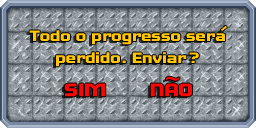
<style>
.page{position:relative;width:256px;height:128px}
.page>*{position:absolute;margin:0}
.t1{font:18px/22px "MTV2C";color:#ffc706;scale:1.2 1}
.t2{font:18px "MTV2C";color:#ffc706;scale:1.2 1}
.t3{font:22px "ArialMT";color:#ff0606;scale:1.2 1}
.t4{font:22px "MTV2C";color:#ff0606;scale:1.2 1}
</style>
<div class="page">
<p class="t1" style="left:29px;top:30px;width:196px;height:37px;text-align:center">Todo o progresso sera<br>perdido. Enviar?</p>
<p class="t2" style="left:220px;top:25px;width:7px;height:6px;rotate:-38deg">-</p>
<p class="t3" style="left:166px;top:76px;width:14px;height:5px">~</p>
<p class="t4" style="left:64px;top:83px;width:42px;height:14px">SIM</p>
<p class="t4" style="left:150px;top:83px;width:42px;height:14px">NAO</p>
</div>
